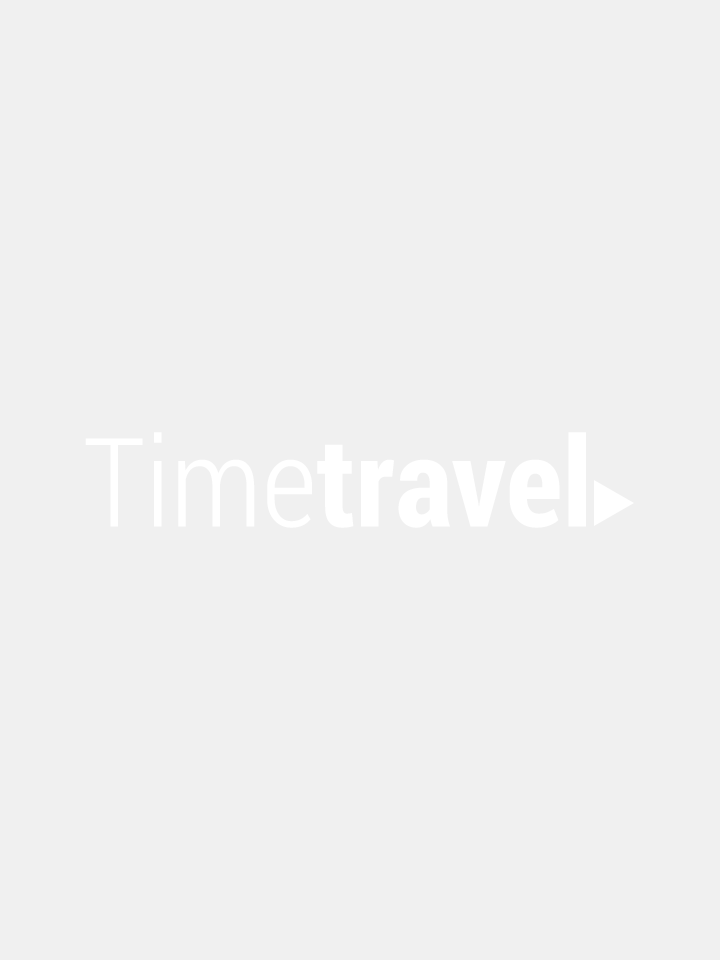
<style>
.page{position:relative;width:720px;height:960px;background:#f0f0f0}
.page>*{position:absolute;margin:0}
.t1{font:123.4px "RobotoCondensed-Bold";color:#ffffff}
.t2{font:123.4px "RobotoCondensed-Light";color:#ffffff}
</style>
<div class="page">
<p class="t1" style="left:85px;top:432px;width:501px;height:96px"><span class="t2">Time</span>travel</p>
</div>
